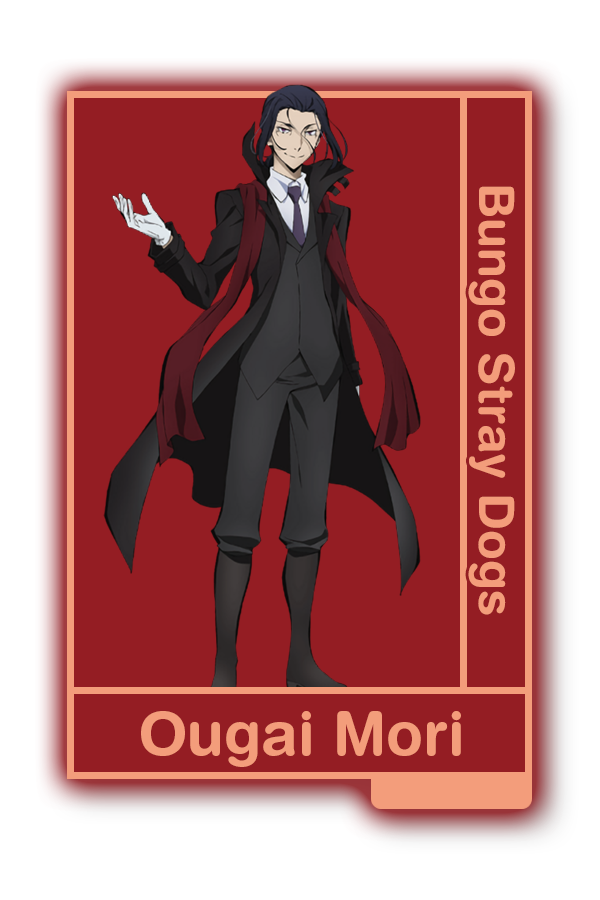
<style>
.page{position:relative;width:600px;height:900px;background:#941d23}
.page>*{position:absolute;margin:0}
.t1{font:48.8px "HelveticaRounded-Bold";color:#f39d7b}
.t2{font:60.3px "HelveticaRounded-Bold";color:#f39d7b}
</style>
<div class="page">
<p class="t1" style="left:468px;top:186px;width:47px;height:429px;rotate:90deg">Bungo Stray Dogs</p>
<p class="t2" style="left:141px;top:711px;width:320px;height:56px">Ougai Mori</p>
</div>
